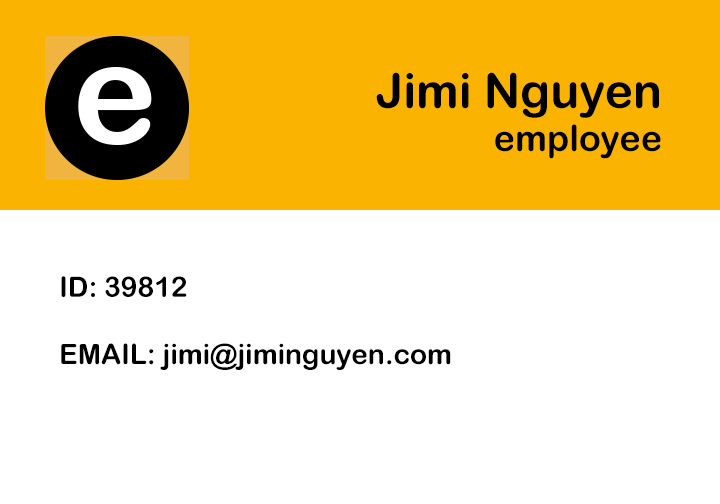
<style>
.page{position:relative;width:720px;height:504px;background:#ffffff}
.page>*{position:absolute;margin:0}
.t1{font:48px "ArialRoundedMTBold";color:#000000}
.t2{font:36px "ArialRoundedMTBold";color:#000000}
.t3{font:28px "ArialRoundedMTBold";color:#000000}
</style>
<div class="page">
<p class="t1" style="left:376px;top:72px;width:285px;height:87px;text-align:right">Jimi Nguyen<br><span class="t2">employee</span></p>
<p class="t3" style="left:61px;top:276px;width:390px;height:94px">ID: 39812 <br><br>EMAIL: jimi@jiminguyen.com</p>
</div>
